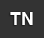
<style>
.page{position:relative;width:44px;height:38px;background:#333333}
.page>*{position:absolute;margin:0}
.t1{font:17.7px "Arial-BoldMT";color:#ffffff;text-transform:uppercase}
</style>
<div class="page">
<p class="t1" style="left:10px;top:12px;width:23px;height:13px">TN</p>
</div>
